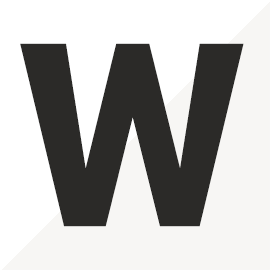
<style>
.page{position:relative;width:270px;height:270px;background:#ffffff}
.page>*{position:absolute;margin:0}
.t1{font:253.1px "Industry-Black";color:#2b2a28;text-transform:uppercase}
</style>
<div class="page">
<p class="t1" style="left:20px;top:43px;width:224px;height:184px">W</p>
</div>
